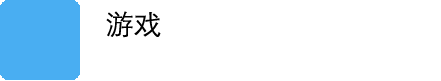
<style>
.page{position:relative;width:441px;height:81px;background:#ffffff}
.page>*{position:absolute;margin:0}
.t1{font:27.8px "STHeitiTC-Light";color:#010101}
</style>
<div class="page">
<p class="t1" style="left:106px;top:11px;width:55px;height:27px">游戏</p>
</div>
